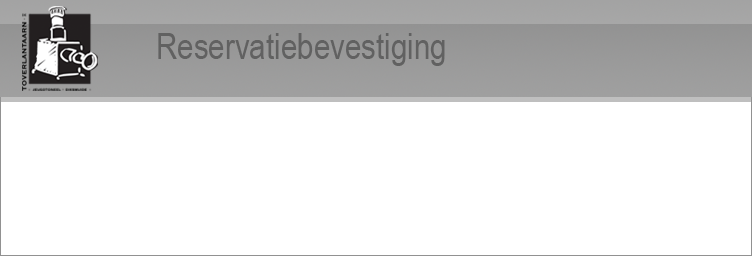
<style>
.page{position:relative;width:752px;height:256px;background:#ffffff}
.page>*{position:absolute;margin:0}
.t1{font:36px "ArialNarrow";color:#616161}
</style>
<div class="page">
<p class="t1" style="left:158px;top:33px;width:287px;height:33px">Reservatiebevestiging</p>
</div>
